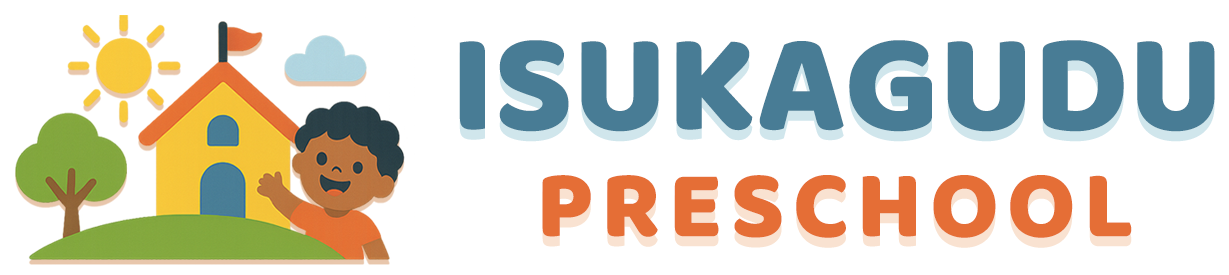
<style>
.page{position:relative;width:1229px;height:275px;background:#ffffff}
.page>*{position:absolute;margin:0}
.t1{font:142.2px "Baloo-Regular";color:#487c95}
.t2{font:97.8px "Baloo-Regular";letter-spacing:0.08em;color:#e56e36}
</style>
<div class="page">
<p class="t1" style="left:459px;top:40px;width:756px;height:92px">ISUKAGUDU</p>
<p class="t2" style="left:542px;top:175px;width:590px;height:63px">PRESCHOOL</p>
</div>
